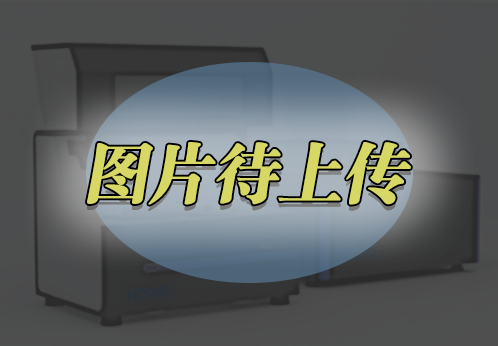
<style>
.page{position:relative;width:498px;height:346px}
.page>*{position:absolute;margin:0}
.t1{font:64.2px "HGBTS_CNKI";letter-spacing:0.01em;color:#d6d765;font-style:italic}
</style>
<div class="page">
<p class="t1" style="left:87px;top:142px;width:324px;height:63px">图片待上传</p>
</div>
